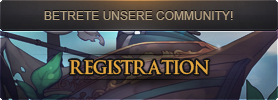
<style>
.page{position:relative;width:278px;height:100px}
.page>*{position:absolute;margin:0}
.t1{font:12px "ArialMT";color:#b39f81}
.t2{font:14px "EPISODE-I";color:#e4a841}
</style>
<div class="page">
<p class="t1" style="left:44px;top:11px;width:189px;height:9px">BETRETE UNSERE COMMUNITY!</p>
<p class="t2" style="left:69px;top:60px;width:140px;height:15px">REGISTRATION</p>
</div>
